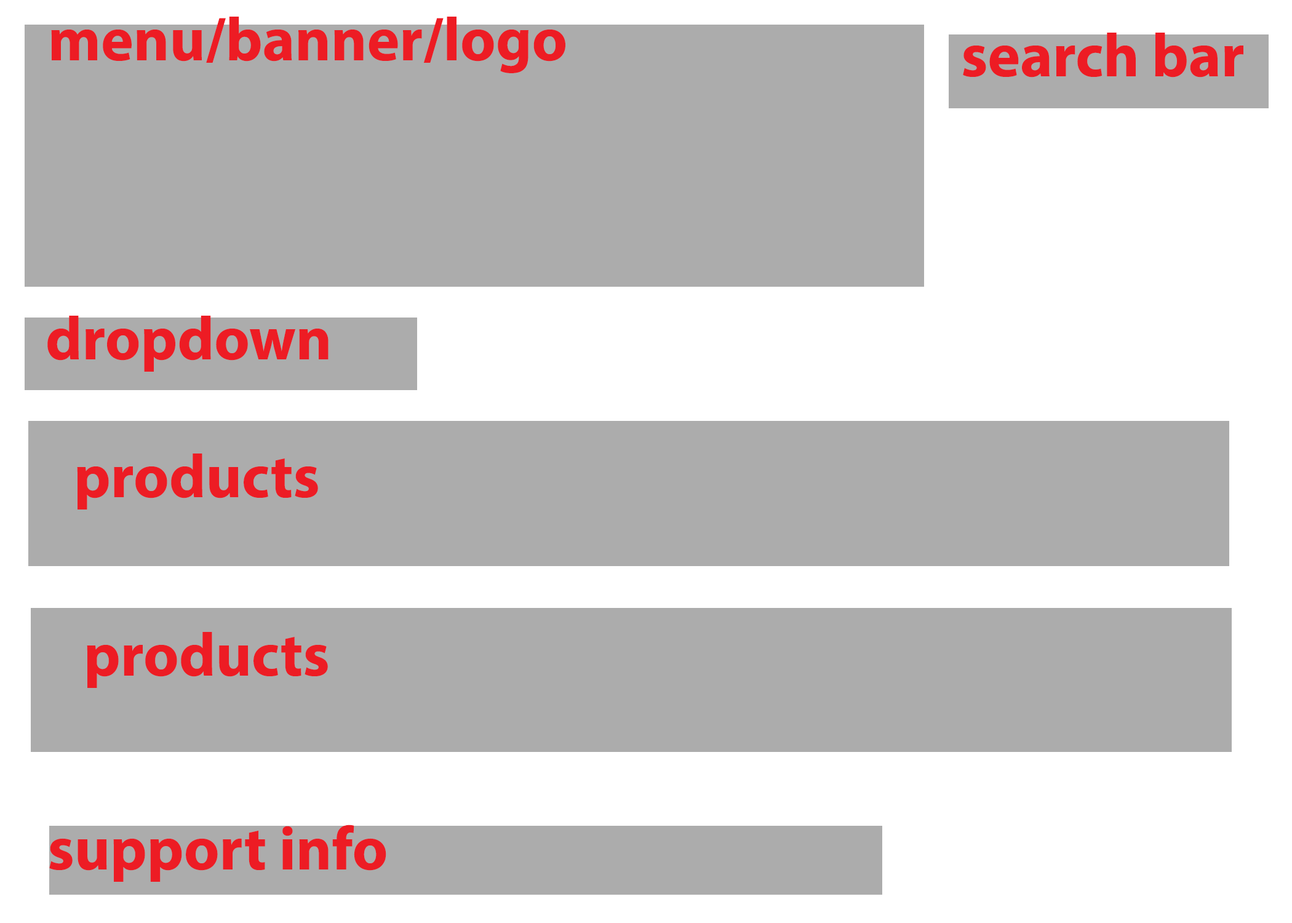
<style>
.page{position:relative;width:1292px;height:923px;background:#acacac}
.page>*{position:absolute;margin:0}
.t1{font:61.5px "MyriadPro-Bold";color:#ed1c24}
</style>
<div class="page">
<p class="t1" style="left:51px;top:17px;width:514px;height:56px">menu/banner/logo</p>
<p class="t1" style="left:963px;top:33px;width:280px;height:45px">search bar</p>
<p class="t1" style="left:47px;top:316px;width:282px;height:56px">dropdown</p>
<p class="t1" style="left:77px;top:453px;width:241px;height:56px">products</p>
<p class="t1" style="left:87px;top:632px;width:241px;height:56px">products</p>
<p class="t1" style="left:49px;top:824px;width:337px;height:58px">support info</p>
</div>
